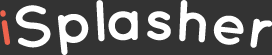
<style>
.page{position:relative;width:272px;height:55px;background:#333333}
.page>*{position:absolute;margin:0}
.t1{font:58.3px "Quicksand-Bold";color:#ffffff}
.t2{font:50px "Quicksand-Bold";color:#ee634d}
</style>
<div class="page">
<p class="t1" style="left:15px;top:0px;width:257px;height:55px">Splasher</p>
<p class="t2" style="left:0px;top:10px;width:10px;height:35px;rotate:-9deg">i</p>
</div>
